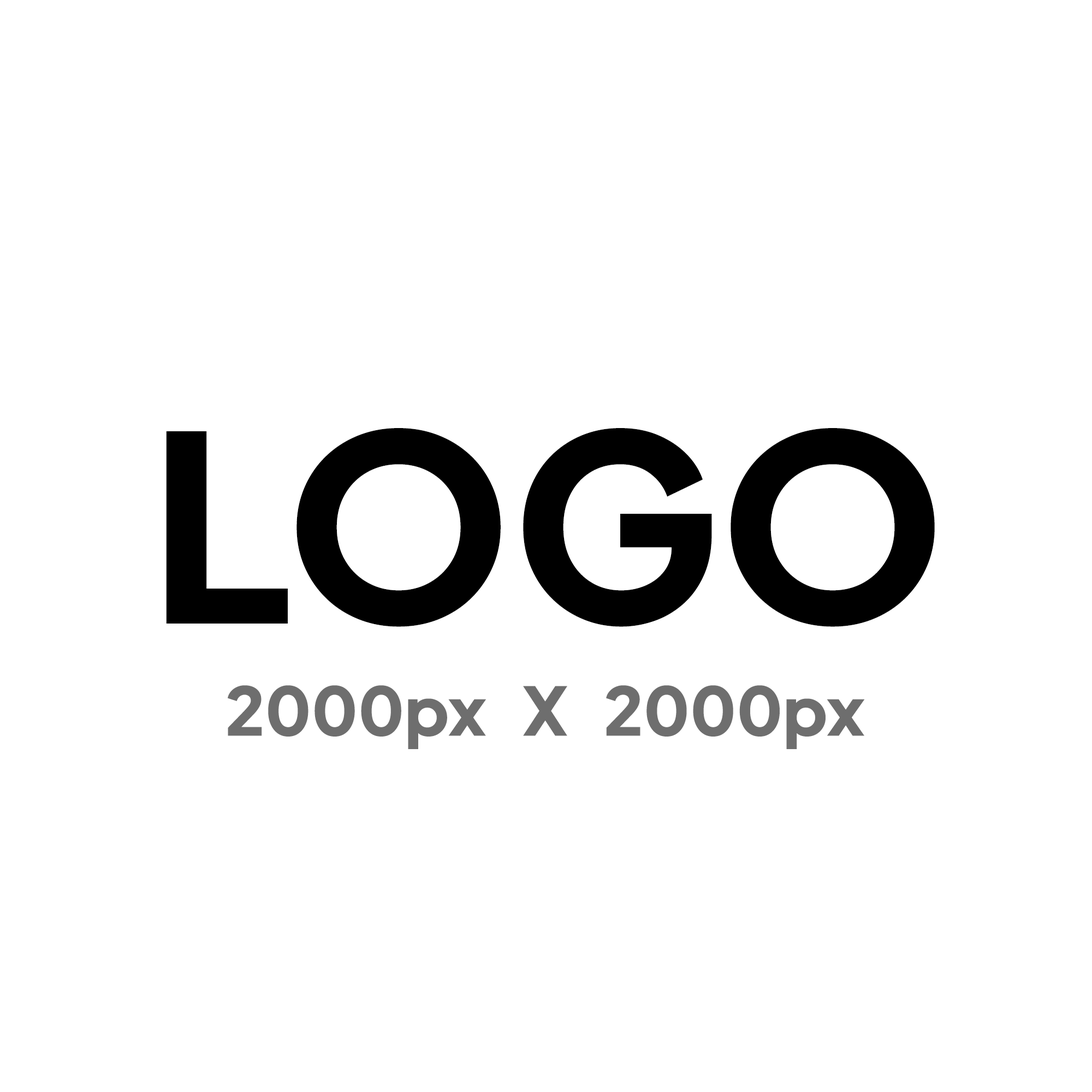
<style>
.page{position:relative;width:1092px;height:1092px;background:#ffffff}
.page>*{position:absolute;margin:0}
.t1{font:258px "PlusJakartaSans-ExtraBold";color:#000000}
.t2{font:66.5px "PlusJakartaSans-ExtraBold";color:#6e6e6e}
</style>
<div class="page">
<p class="t1" style="left:166px;top:428px;width:769px;height:199px">LOGO</p>
<p class="t2" style="left:228px;top:685px;width:637px;height:64px">2000px   X   2000px</p>
</div>
